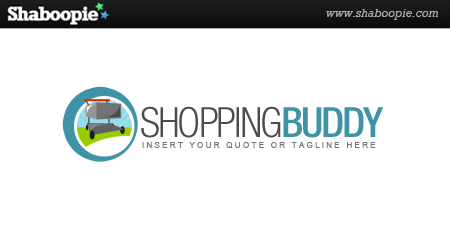
<style>
.page{position:relative;width:450px;height:250px;background:#ffffff}
.page>*{position:absolute;margin:0}
.t1{font:41.7px "HelveticaNeueLTStd-LtCn";letter-spacing:-0.05em;color:#4b4b4b}
.t2{font:41.7px "HelveticaNeueLTStd-MdCn";letter-spacing:-0.05em;color:#3e94a6}
.t3{font:8.3px "ArialMT";letter-spacing:0.25em;color:#767676}
</style>
<div class="page">
<p class="t1" style="left:141px;top:106px;width:243px;height:32px">SHOPPING<span class="t2">BUDDY</span></p>
<p class="t3" style="left:142px;top:142px;width:234px;height:7px">INSERT YOUR QUOTE OR TAGLINE HERE</p>
</div>
